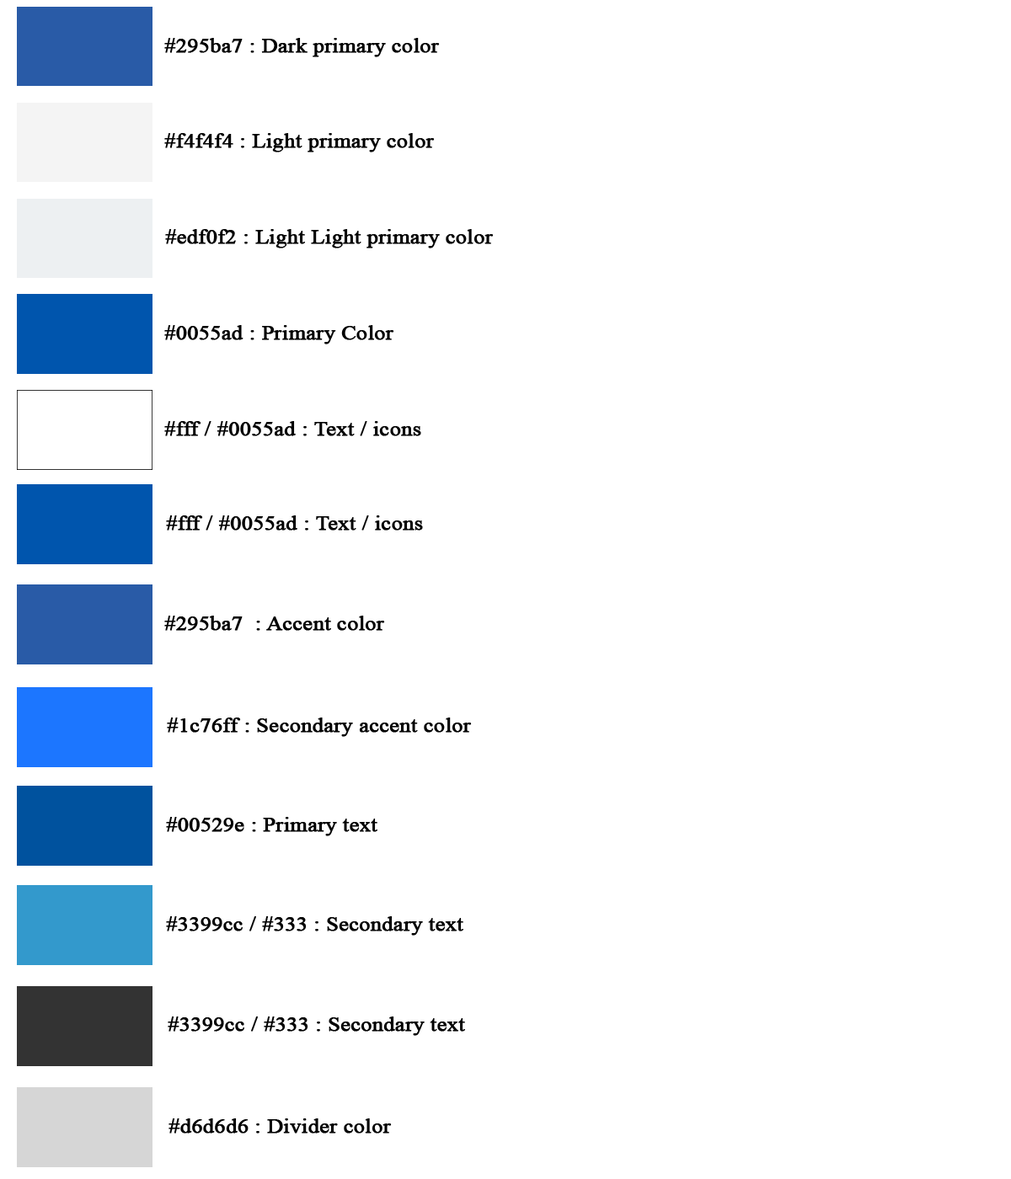
<style>
.page{position:relative;width:1011px;height:1179px;background:#ffffff}
.page>*{position:absolute;margin:0}
.t1{font:20px "TimesNewRomanPSMT";color:#000000;font-weight:bold;scale:1.08 1}
</style>
<div class="page">
<p class="t1" style="left:164px;top:38px;width:276px;height:19px">#295ba7 : Dark primary color</p>
<p class="t1" style="left:164px;top:133px;width:271px;height:19px">#f4f4f4 : Light primary color</p>
<p class="t1" style="left:165px;top:229px;width:329px;height:20px">#edf0f2 : Light Light primary color</p>
<p class="t1" style="left:164px;top:325px;width:230px;height:20px">#0055ad : Primary Color</p>
<p class="t1" style="left:164px;top:421px;width:257px;height:15px">#fff / #0055ad : Text / icons</p>
<p class="t1" style="left:166px;top:516px;width:257px;height:15px">#fff / #0055ad : Text / icons</p>
<p class="t1" style="left:164px;top:616px;width:221px;height:15px">#295ba7  : Accent color</p>
<p class="t1" style="left:167px;top:718px;width:305px;height:19px">#1c76ff : Secondary accent color</p>
<p class="t1" style="left:166px;top:817px;width:211px;height:20px">#00529e : Primary text</p>
<p class="t1" style="left:166px;top:917px;width:297px;height:19px">#3399cc / #333 : Secondary text</p>
<p class="t1" style="left:168px;top:1017px;width:297px;height:19px">#3399cc / #333 : Secondary text</p>
<p class="t1" style="left:168px;top:1119px;width:224px;height:15px">#d6d6d6 : Divider color</p>
</div>
